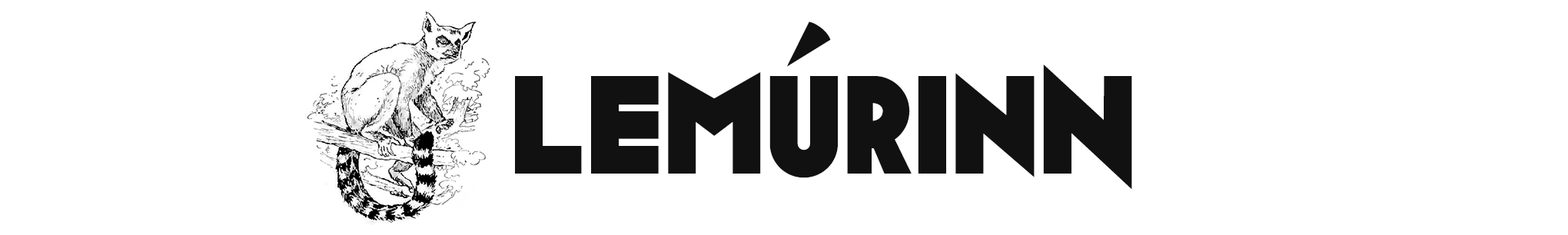
<style>
.page{position:relative;width:1568px;height:235px;background:#ffffff}
.page>*{position:absolute;margin:0}
.t1{font:138.4px "Geomancy-ExtraBold";color:#111111}
</style>
<div class="page">
<p class="t1" style="left:515px;top:22px;width:617px;height:168px">lEmÚrInN</p>
</div>
